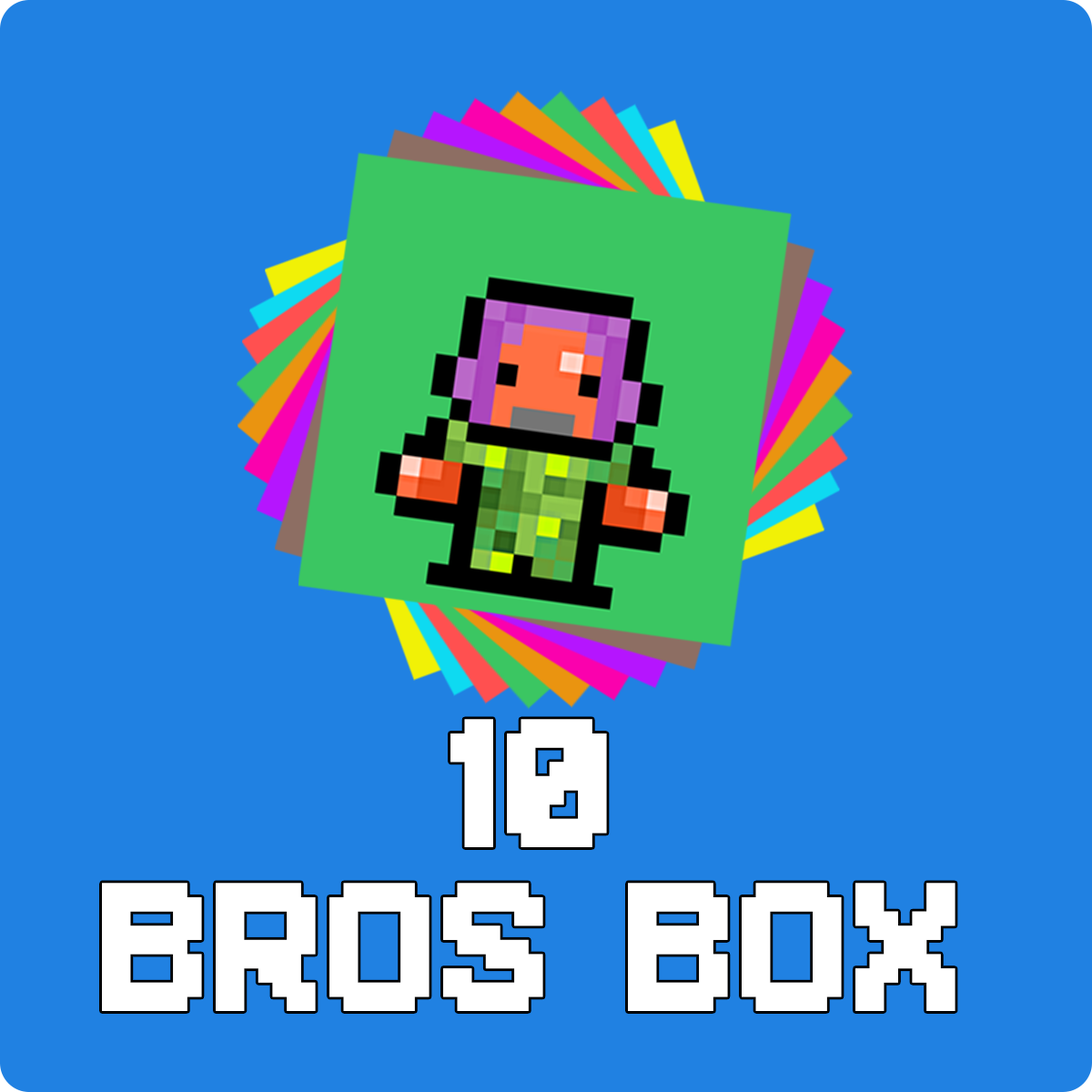
<style>
.page{position:relative;width:1092px;height:1092px;background:#2081e2}
.page>*{position:absolute;margin:0}
.t1{font:227.5px/163.8px "Superstar";color:#ffffff}
</style>
<div class="page">
<p class="t1" style="left:102px;top:719px;width:853px;height:292px;text-align:center">10<br>BROS BOX</p>
</div>
